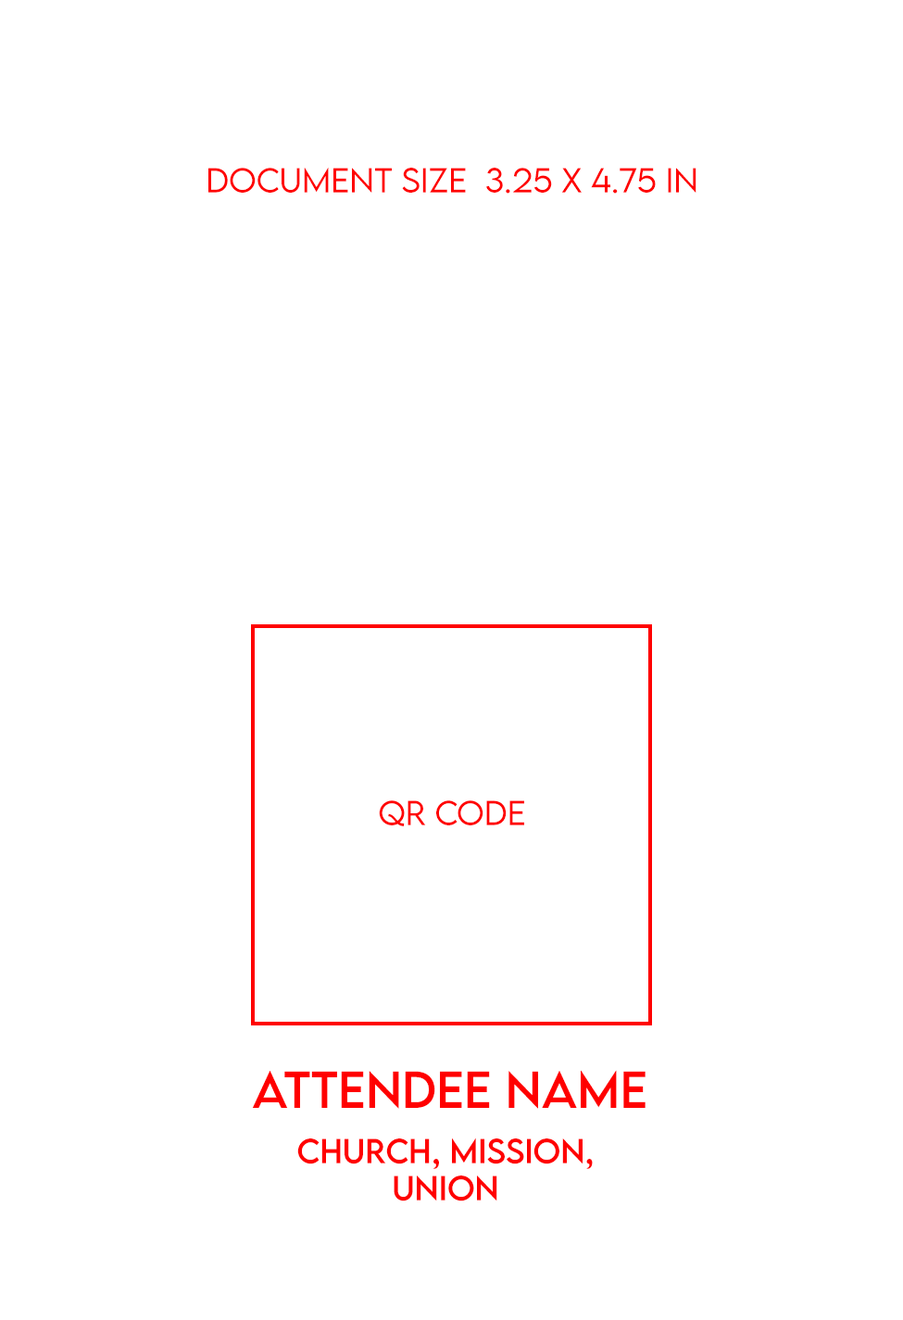
<style>
.page{position:relative;width:903px;height:1320px;background:#ffffff}
.page>*{position:absolute;margin:0}
.t1{font:30.9px "LEMONMILK-Light";color:#ff0000}
.t2{font:46.3px "LEMONMILK-Regular";color:#ff0000}
.t3{font:30.9px "LEMONMILK-Regular";color:#ff0000}
</style>
<div class="page">
<p class="t1" style="left:208px;top:168px;width:489px;height:26px">document size  3.25 x 4.75 in</p>
<p class="t1" style="left:379px;top:800px;width:145px;height:26px">qr code</p>
<p class="t2" style="left:252px;top:1070px;width:394px;height:39px">attendee name</p>
<p class="t3" style="left:297px;top:1139px;width:296px;height:63px;text-align:center">church, Mission,<br>Union</p>
</div>
